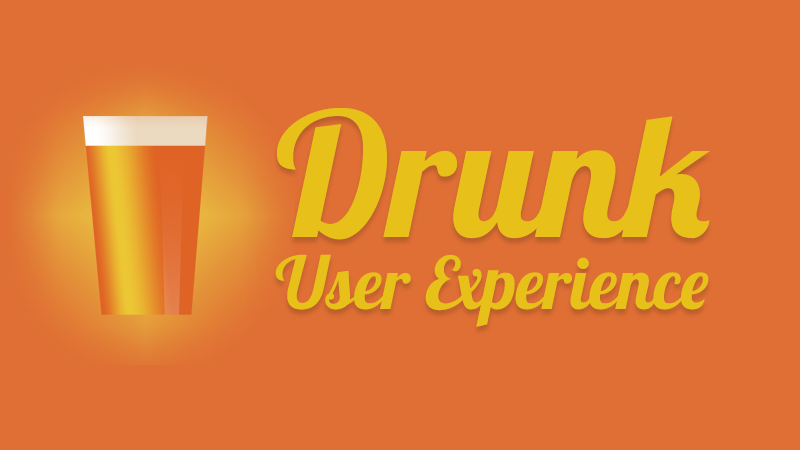
<style>
.page{position:relative;width:800px;height:450px;background:#df6f34}
.page>*{position:absolute;margin:0}
.t1{font:72px/72px "Lobster-Regular";color:#e7c11a}
.t2{font:172px/72px "Lobster-Regular";color:#e7c11a}
</style>
<div class="page">
<p class="t1" style="left:275px;top:108px;width:435px;height:219px"><span class="t2">Drunk<br></span>User Experience</p>
</div>
